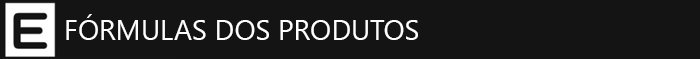
<style>
.page{position:relative;width:700px;height:59px;background:#141414}
.page>*{position:absolute;margin:0}
.t1{font:28px "SegoeUI";color:#ffffff}
</style>
<div class="page">
<p class="t1" style="left:66px;top:14px;width:352px;height:26px">FÓRMULAS DOS PRODUTOS</p>
</div>
